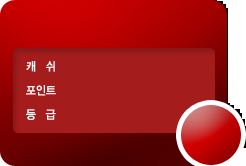
<style>
.page{position:relative;width:246px;height:166px;background:#a41c1c}
.page>*{position:absolute;margin:0}
.t1{font:12px/24px "YDIYGO330";color:#ffffff;scale:0.9 1}
</style>
<div class="page">
<p class="t1" style="left:26px;top:61px;width:30px;height:59px">캐   쉬<br>포인트 <br>등   급</p>
</div>
